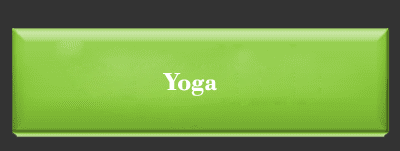
<style>
.page{position:relative;width:400px;height:151px;background:#333333}
.page>*{position:absolute;margin:0}
.t1{font:26px "BodoniBT-Bold";color:#ffffff}
</style>
<div class="page">
<p class="t1" style="left:163px;top:73px;width:54px;height:23px">Yoga</p>
</div>
